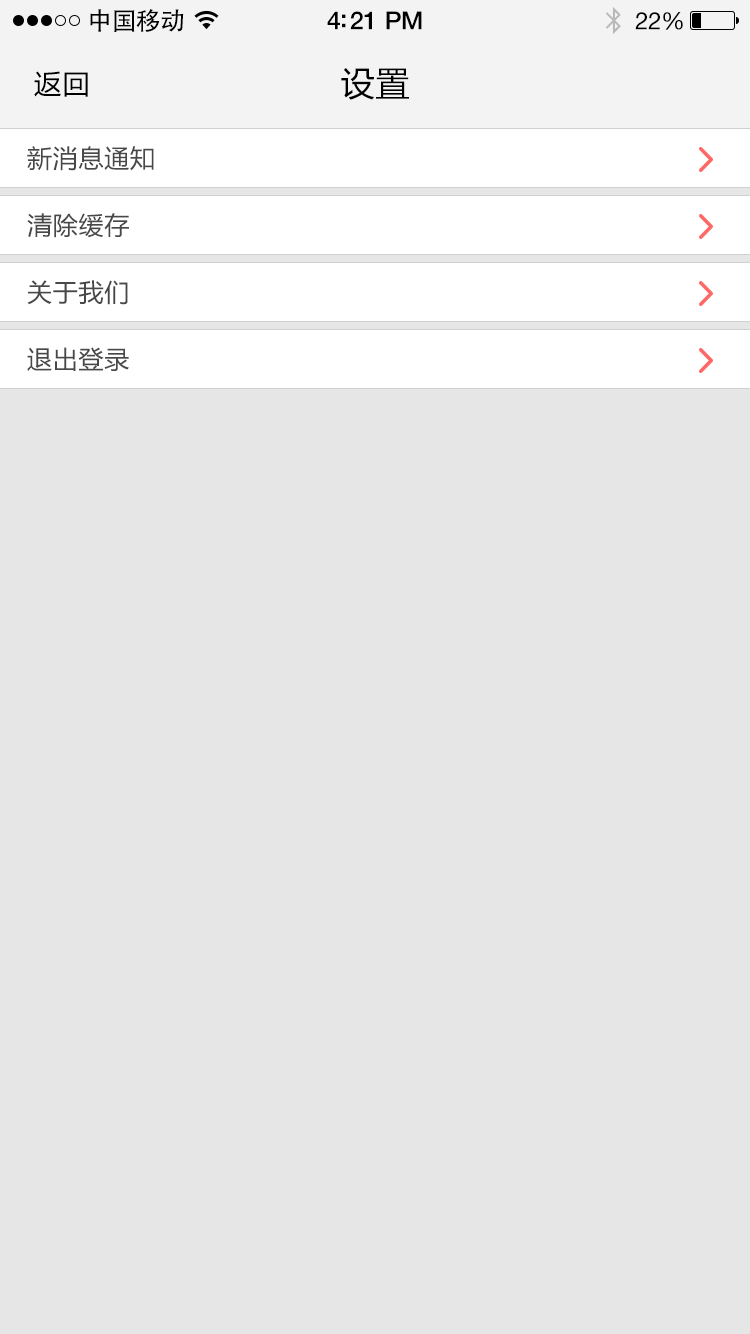
<style>
.page{position:relative;width:750px;height:1334px;background:#e6e6e6}
.page>*{position:absolute;margin:0}
.t1{font:25px "AdobeHeitiStd-Regular";letter-spacing:-0.025em;color:#000000}
.t2{font:25px "HelveticaNeue-Medium";letter-spacing:-0.02em;color:#000000}
.t3{font:24px "HelveticaNeue";letter-spacing:-0.02em;color:#000000}
.t4{font:27px "MicrosoftYaHei";letter-spacing:0.05em;color:#000000}
.t5{font:34px "MicrosoftYaHei";letter-spacing:0.03em;color:#000000}
.t6{font:25px "MicrosoftYaHei";letter-spacing:0.03em;color:#555555}
</style>
<div class="page">
<p class="t1" style="left:90px;top:9px;width:94px;height:23px">中国移动</p>
<p class="t2" style="left:327px;top:11px;width:95px;height:19px">4:21 PM</p>
<p class="t3" style="left:635px;top:12px;width:48px;height:18px">22%</p>
<p class="t4" style="left:34px;top:71px;width:54px;height:26px">返回</p>
<p class="t5" style="left:341px;top:68px;width:68px;height:32px">设置</p>
<p class="t6" style="left:27px;top:146px;width:127px;height:25px">新消息通知</p>
<p class="t6" style="left:27px;top:213px;width:102px;height:25px">清除缓存</p>
<p class="t6" style="left:27px;top:280px;width:101px;height:25px">关于我们</p>
<p class="t6" style="left:27px;top:347px;width:102px;height:24px">退出登录</p>
</div>
